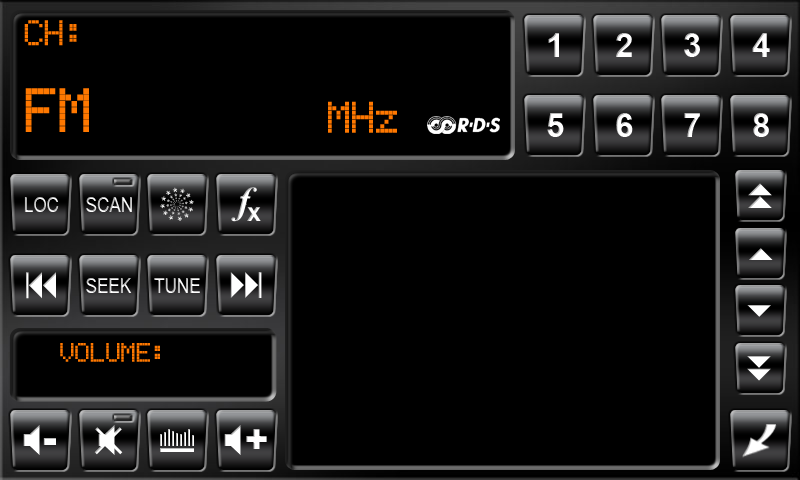
<style>
.page{position:relative;width:800px;height:480px;background:#000000}
.page>*{position:absolute;margin:0}
.t1{font:33.3px "EricssonGA628";color:#ff7800}
.t2{font:33.3px "Arial-BoldMT";color:#ffffff}
.t3{font:58.3px "EricssonGA628";color:#ff7800;scale:0.94 1}
.t4{font:41.7px "EricssonGA628";color:#ff7800;scale:0.94 1}
.t5{font:20.8px "ArialNarrow"}
.t6{font:25px "EricssonGA628";color:#ff7800}
</style>
<div class="page">
<p class="t1" style="left:24px;top:20px;width:53px;height:26px">CH:</p>
<p class="t2" style="left:548px;top:33px;width:11px;height:24px">1</p>
<p class="t2" style="left:616px;top:33px;width:16px;height:24px">2</p>
<p class="t2" style="left:684px;top:33px;width:16px;height:24px">3</p>
<p class="t2" style="left:752px;top:33px;width:18px;height:24px">4</p>
<p class="t3" style="left:25px;top:88px;width:64px;height:44px">FM</p>
<p class="t4" style="left:328px;top:101px;width:69px;height:32px">MHz</p>
<p class="t2" style="left:547px;top:113px;width:17px;height:24px">5</p>
<p class="t2" style="left:616px;top:113px;width:17px;height:24px">6</p>
<p class="t2" style="left:684px;top:113px;width:16px;height:24px">7</p>
<p class="t2" style="left:753px;top:113px;width:16px;height:24px">8</p>
<p class="t5" style="left:24px;top:197px;width:35px;height:15px">LOC</p>
<p class="t5" style="left:86px;top:197px;width:46px;height:15px">SCAN</p>
<p class="t5" style="left:86px;top:278px;width:46px;height:15px">SEEK</p>
<p class="t5" style="left:154px;top:278px;width:46px;height:15px">TUNE</p>
<p class="t6" style="left:60px;top:343px;width:100px;height:19px">VOLUME:</p>
</div>
